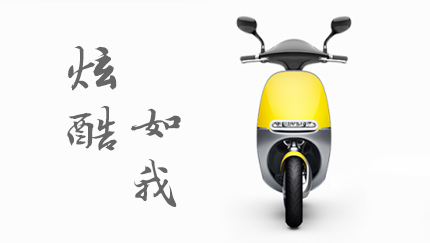
<style>
.page{position:relative;width:430px;height:243px;background:#fcfcfc}
.page>*{position:absolute;margin:0}
.t1{font:66.7px/60px "FZZJ-LJDXKJW";letter-spacing:-0.01em;color:#666666}
.t2{font:53.3px/60px "FZZJ-LJDXKJW";letter-spacing:-0.01em;color:#666666}
</style>
<div class="page">
<p class="t1" style="left:67px;top:46px;width:50px;height:105px">炫<br>酷</p>
<p class="t2" style="left:131px;top:108px;width:50px;height:99px">如<br>我</p>
</div>
